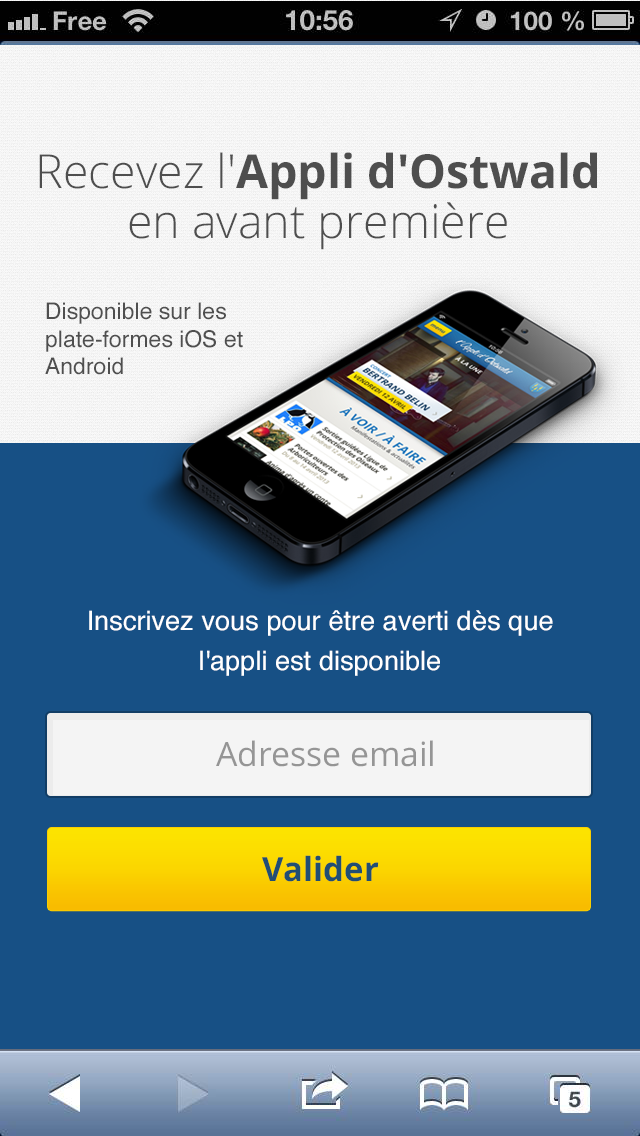
<style>
.page{position:relative;width:640px;height:1136px;background:#175085}
.page>*{position:absolute;margin:0}
.t1{font:30px/51px "OpenSans";color:#4e4e4e}
.t2{font:46.6px/50px "OpenSans-Light";color:#4e4e4e}
.t3{font:46.6px/50px "OpenSans-Bold";color:#4e4e4e}
.t4{font:30px/36.8px "OpenSans";color:#4e4e4e}
.t5{font:23px "Helvetica";color:#4f4f4f}
.t6{font:27px/39.9px "Helvetica";color:#ffffff}
.t7{font:33.4px "OpenSans";color:#959595}
.t8{font:33.2px "OpenSans-Bold";color:#214e74}
</style>
<div class="page">
<p class="t1" style="left:39px;top:152px;width:558px;height:98px;text-align:center"><span class="t2">Recevez l'</span><span class="t3">Appli d'Ostwald</span><span class="t2"> en avant première<br></span>pour suivre en direct les informations <span class="t4">pratiques de votre ville</span></p>
<p class="t5" style="left:45px;top:302px;width:198px;height:73px">Disponible sur les plate-formes iOS et Android</p>
<p class="t6" style="left:89px;top:610px;width:464px;height:66px;text-align:center">Inscrivez vous pour être averti dès que l'appli est disponible</p>
<p class="t7" style="left:216px;top:740px;width:217px;height:27px">Adresse email</p>
<p class="t8" style="left:262px;top:855px;width:117px;height:27px">Valider</p>
</div>
